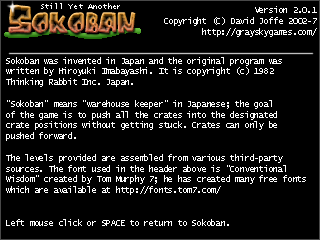
<style>
.page{position:relative;width:320px;height:240px;background:#000000}
.page>*{position:absolute;margin:0}
.t1{font:8px "LucidaConsole";letter-spacing:-0.025em;color:#ffffff}
.t2{font:9px "LucidaConsole";letter-spacing:-0.025em;color:#ffffff}
</style>
<div class="page">
<p class="t1" style="left:41px;top:3px;width:79px;height:6px">Still Yet Another</p>
<p class="t2" style="left:164px;top:6px;width:153px;height:31px;text-align:right"><span class="t1"><br></span>Version 2.0.1<br>Copyright (C) David Joffe 2002-7<br>http://grayskygames.com/</p>
<p class="t2" style="left:6px;top:57px;width:300px;height:169px">Sokoban was invented in Japan and the original program was<br>written by Hiroyuki Imabayashi. It is copyright (c) 1982<br>Thinking Rabbit Inc. Japan.<br><br>"Sokoban" means "warehouse keeper" in Japanese; the goal<br>of the game is to push all the crates into the designated<br>crate positions without getting stuck. Crates can only be<br>pushed forward.<br><br>The levels provided are assembled from various third-party<br>sources. The font used in the header above is "Conventional<br>Wisdom" created by Tom Murphy 7; he has created many free fonts<br>which are available at http://fonts.tom7.com/<br><br><br>Left mouse click or SPACE to return to Sokoban.</p>
</div>
